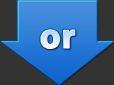
<style>
.page{position:relative;width:114px;height:85px;background:#333333}
.page>*{position:absolute;margin:0}
.t1{font:36px "MyriadPro-Bold";font-weight:bold}
</style>
<div class="page">
<p class="t1" style="left:40px;top:29px;width:36px;height:20px">or</p>
</div>
